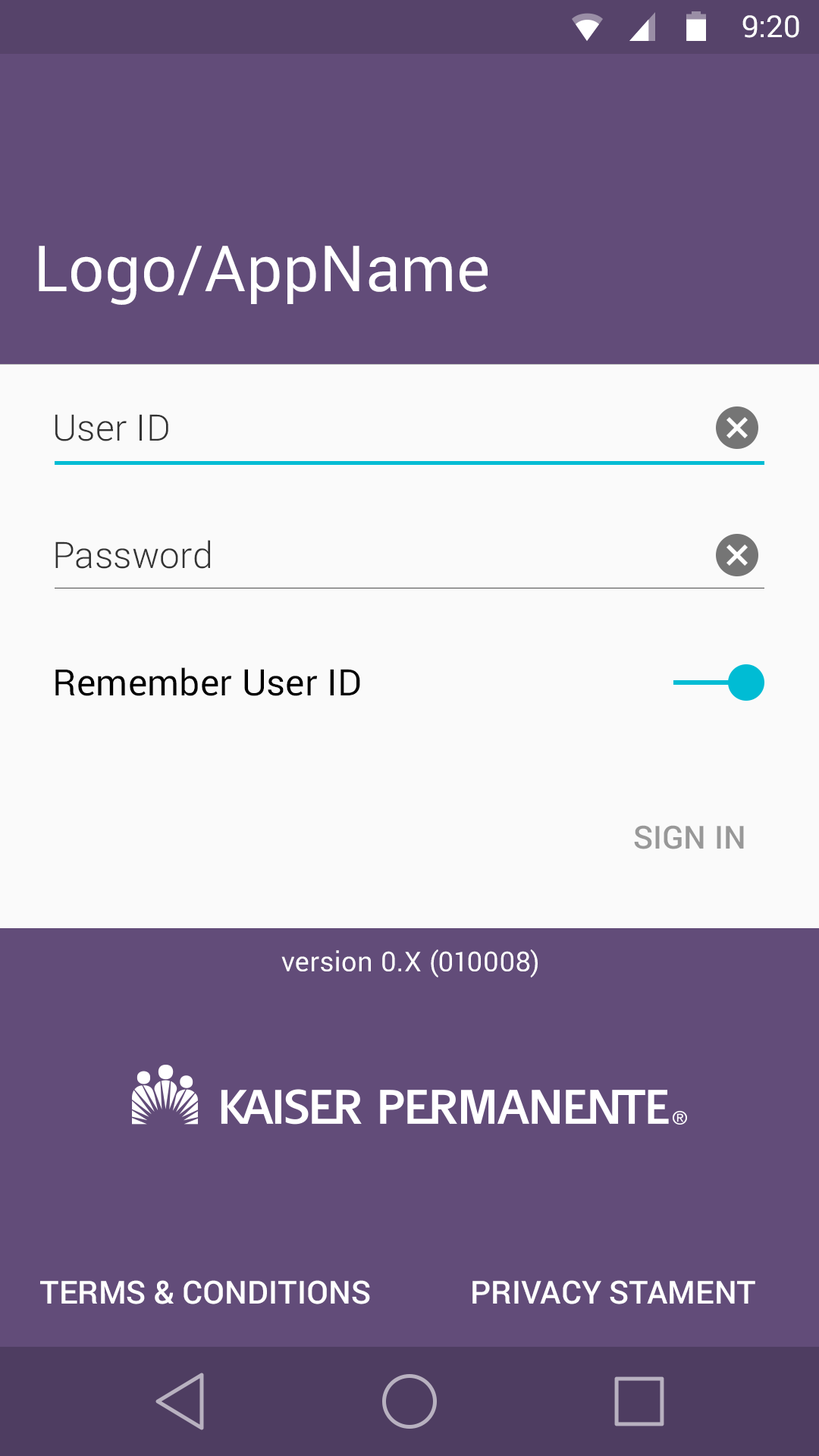
<style>
.page{position:relative;width:819px;height:1456px;background:#624c79}
.page>*{position:absolute;margin:0}
.t1{font:30.3px "Roboto-Regular";color:#ffffff}
.t2{font:63.7px "Roboto-Regular";letter-spacing:0.005em;color:#ffffff}
.t3{font:36.4px "Roboto-Light";letter-spacing:0.005em;color:#333333}
.t4{font:36.4px "Roboto-Regular";letter-spacing:0.005em;color:#000000}
.t5{font:31.8px "Roboto-Medium";color:#989898;text-transform:uppercase}
.t6{font:27.3px "Roboto-Regular";letter-spacing:0.025em;color:#ffffff}
.t7{font:31.8px "Roboto-Medium";color:#ffffff;text-transform:uppercase}
</style>
<div class="page">
<p class="t1" style="left:742px;top:15px;width:57px;height:23px">9:20</p>
<p class="t2" style="left:39px;top:246px;width:449px;height:59px">Logo/AppName</p>
<p class="t3" style="left:55px;top:414px;width:113px;height:27px">User ID</p>
<p class="t3" style="left:55px;top:540px;width:155px;height:29px">Password</p>
<p class="t4" style="left:55px;top:667px;width:305px;height:29px">Remember User ID</p>
<p class="t5" style="left:634px;top:825px;width:110px;height:24px">Sign In</p>
<p class="t6" style="left:281px;top:949px;width:257px;height:28px">version 0.X (010008)</p>
<p class="t7" style="left:40px;top:1280px;width:330px;height:24px">Terms &amp; Conditions</p>
<p class="t7" style="left:472px;top:1280px;width:283px;height:24px">Privacy Stament</p>
</div>
